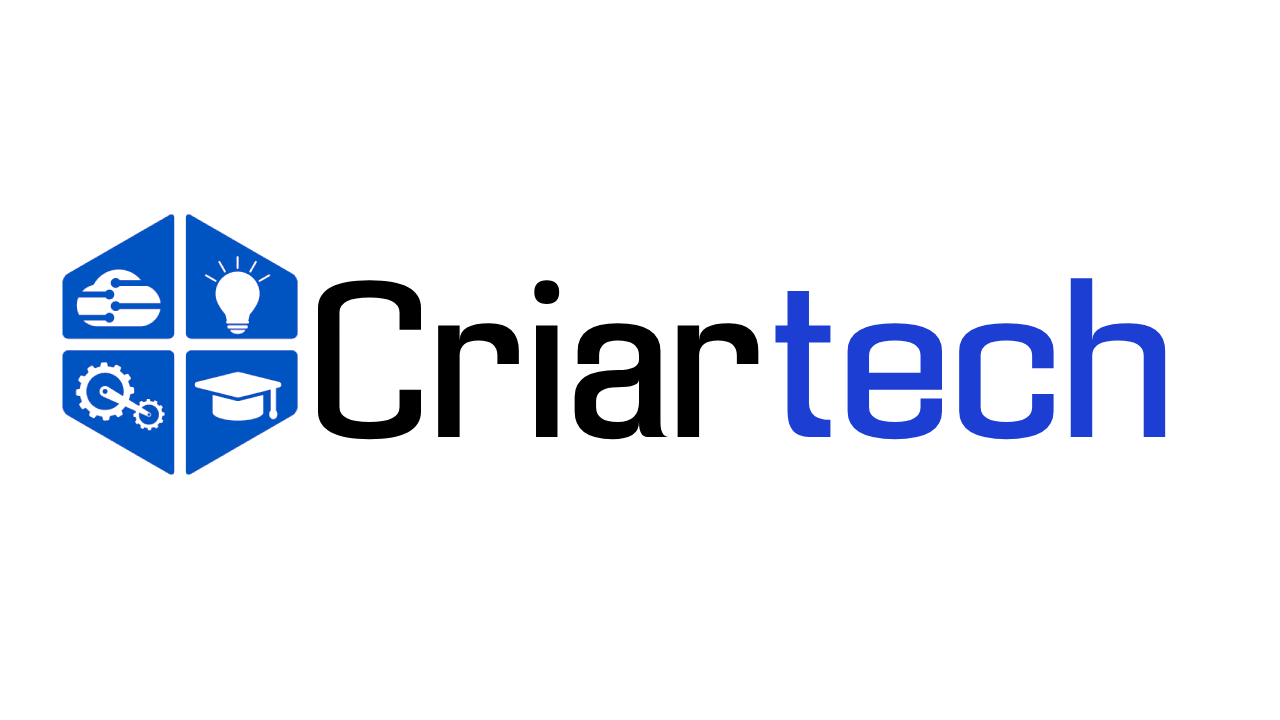
<style>
.page{position:relative;width:1280px;height:720px;background:#ffffff}
.page>*{position:absolute;margin:0}
.t1{font:206px "Enigmatic";color:#000000}
.t2{font:206px "Enigmatic";color:#1c3ed3}
</style>
<div class="page">
<p class="t1" style="left:318px;top:278px;width:848px;height:162px">Criar<span class="t2">tech</span></p>
</div>
